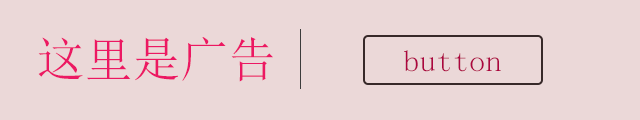
<style>
.page{position:relative;width:640px;height:120px;background:#ebd8d8}
.page>*{position:absolute;margin:0}
.t1{font:48px "SimSun";color:#ec1863}
.t2{font:30px "SimSun";color:#ac0540;scale:1.1 1}
</style>
<div class="page">
<p class="t1" style="left:38px;top:37px;width:235px;height:45px">这里是广告</p>
<p class="t2" style="left:404px;top:50px;width:97px;height:22px">button</p>
</div>
